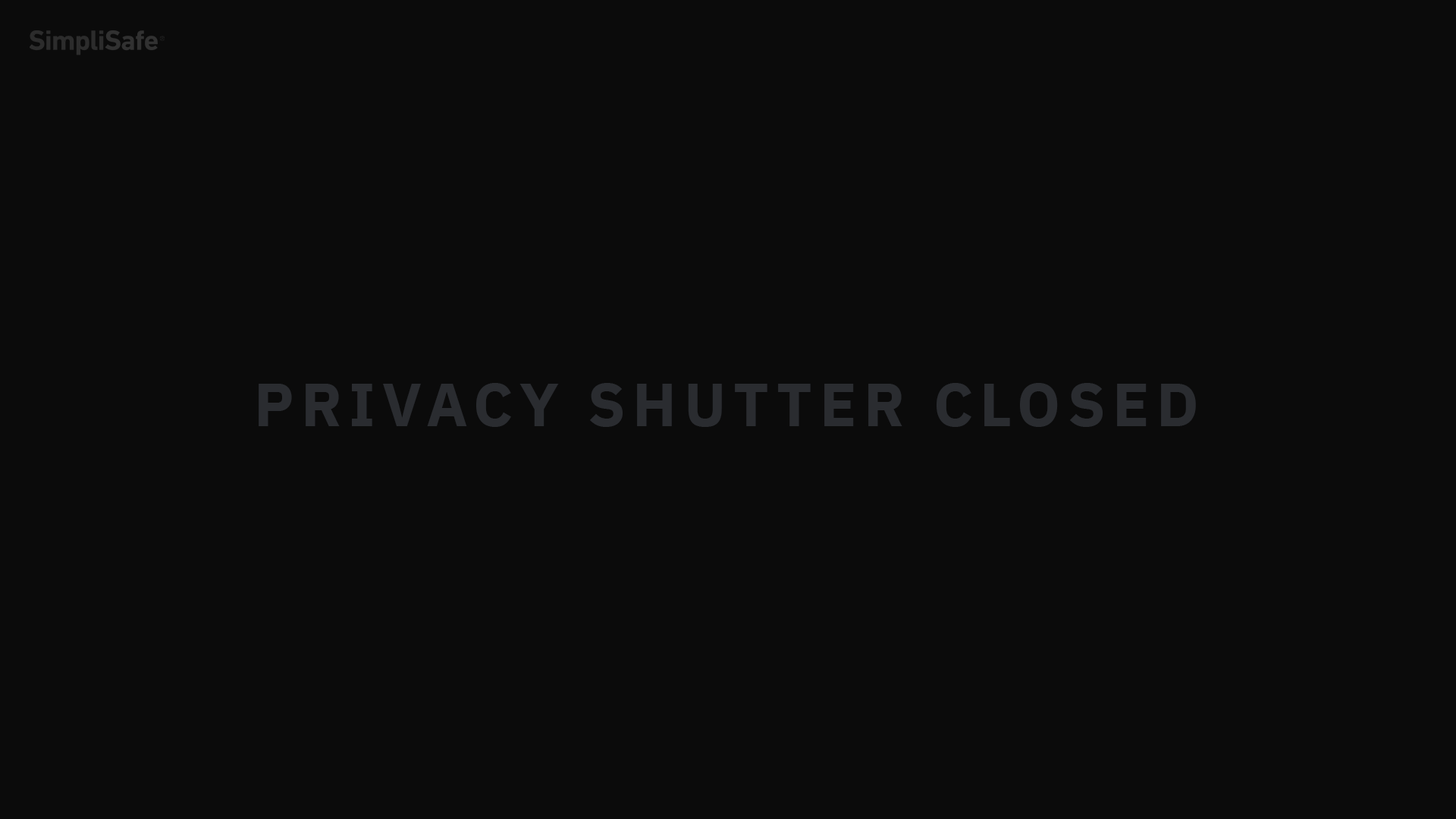
<style>
.page{position:relative;width:1456px;height:819px;background:#0b0b0b}
.page>*{position:absolute;margin:0}
.t1{font:60.7px "IBMPlexSans-Bold";letter-spacing:0.12em;color:#2a2c30;text-transform:uppercase}
</style>
<div class="page">
<p class="t1" style="left:259px;top:383px;width:937px;height:44px">Privacy Shutter Closed</p>
</div>
